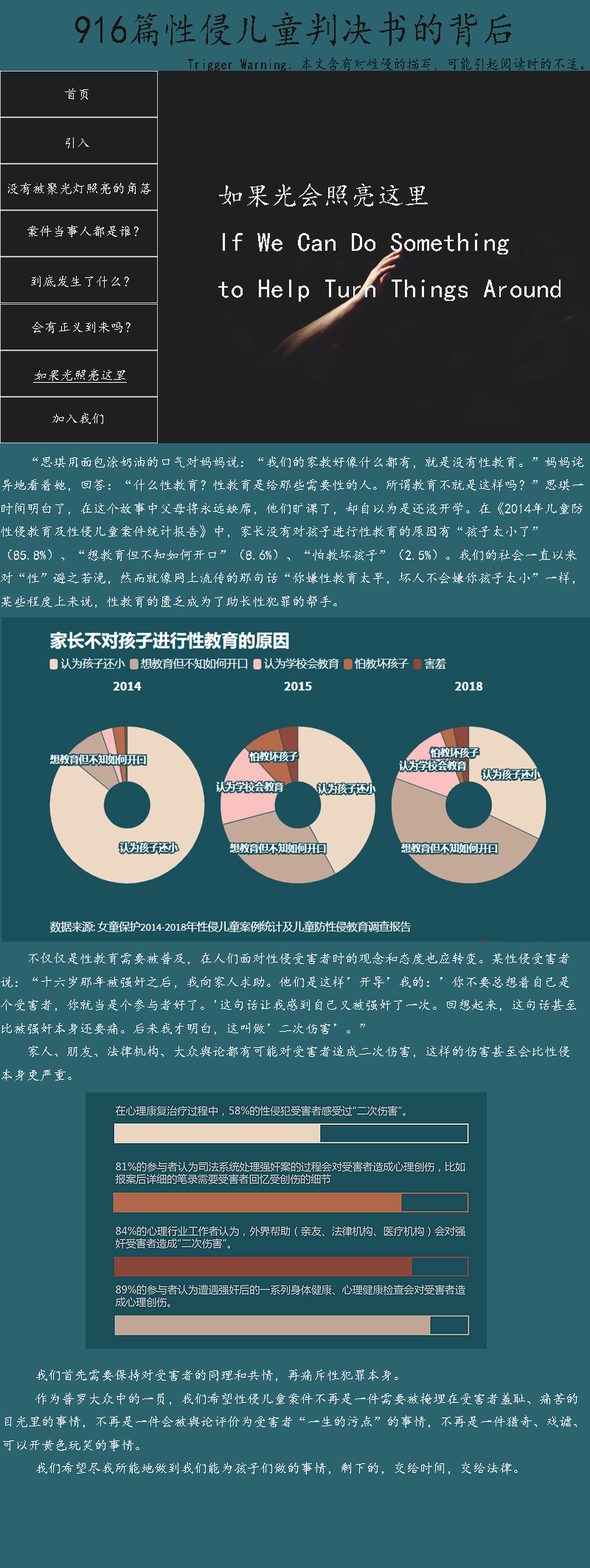
<style>
.page{position:relative;width:590px;height:1568px;background:#2b646f}
.page>*{position:absolute;margin:0}
.t1{font:39.3px "¿¬Ìå";color:#171414;scale:0.9 1}
.t2{font:14.8px "¿¬Ìå";color:#171414;scale:0.9 1}
.t3{font:13.3px "¿¬Ìå";color:#f9f5f5}
.t4{font:26.6px "¿¬Ìå";color:#fbf3f3}
.t5{font:13.3px "¿¬Ìå";color:#f9f5f5;font-style:italic;text-decoration:underline}
.t6{font:13.3px "¿¬Ìå";color:#fbf3f3}
</style>
<div class="page">
<p class="t1" style="left:75px;top:12px;width:436px;height:35px">916篇性侵儿童判决书的背后</p>
<p class="t2" style="left:188px;top:58px;width:395px;height:14px">Trigger Warning：本文含有对性侵的描写，可能引起阅读时的不适。</p>
<p class="t3" style="left:65px;top:89px;width:24px;height:11px">首页</p>
<p class="t3" style="left:66px;top:137px;width:23px;height:11px">引入</p>
<p class="t3" style="left:8px;top:182px;width:143px;height:13px">没有被聚光灯照亮的角落</p>
<p class="t4" style="left:218px;top:184px;width:343px;height:118px">如果光会照亮这里<br>If We Can Do Something <br>to Help Turn Things Around</p>
<p class="t3" style="left:27px;top:225px;width:112px;height:12px">案件当事人都是谁？</p>
<p class="t3" style="left:31px;top:275px;width:98px;height:13px">到底发生了什么？</p>
<p class="t3" style="left:32px;top:322px;width:99px;height:11px">会有正义到来吗？</p>
<p class="t5" style="left:33px;top:369px;width:94px;height:14px">如果光照亮这里</p>
<p class="t3" style="left:52px;top:413px;width:51px;height:11px">加入我们</p>
<p class="t6" style="left:1px;top:457px;width:582px;height:151px">“思琪用面包涂奶油的口气对妈妈说：“我们的家教好像什么都有，就是没有性教育。”妈妈诧<br>异地看着她，回答：“什么性教育？性教育是给那些需要性的人。所谓教育不就是这样吗？”思琪一<br>时间明白了，在这个故事中父母将永远缺席，他们旷课了，却自以为是还没开学。在《2014年儿童防<br>性侵教育及性侵儿童案件统计报告》中，家长没有对孩子进行性教育的原因有“孩子太小了”<br>（85.8%）、“想教育但不知如何开口”（8.6%）、“怕教坏孩子”（2.5%）。我们的社会一直以来<br>对“性”避之若浼，然而就像网上流传的那句话“你嫌性教育太早，坏人不会嫌你孩子太小”一样，<br>某些程度上来说，性教育的匮乏成为了助长性犯罪的帮手。</p>
<p class="t6" style="left:1px;top:952px;width:575px;height:129px">不仅仅是性教育需要被普及，在人们面对性侵受害者时的观念和态度也应转变。某性侵受害者<br>说：“十六岁那年被强奸之后，我向家人求助。他们是这样’开导’我的：’你不要总想着自己是<br>个受害者，你就当是个参与者好了。'这句话让我感到自己又被强奸了一次。回想起来，这句话甚至<br>比被强奸本身还要痛。后来我才明白，这叫做’二次伤害’。”<br>    家人、朋友、法律机构、大众舆论都有可能对受害者造成二次伤害，这样的伤害甚至会比性侵<br>本身更严重。</p>
<p class="t6" style="left:3px;top:1370px;width:574px;height:104px">我们首先需要保持对受害者的同理和共情，再痛斥性犯罪本身。<br>     作为普罗大众中的一员，我们希望性侵儿童案件不再是一件需要被掩埋在受害者羞耻、痛苦的<br>目光里的事情，不再是一件会被舆论评价为受害者“一生的污点”的事情，不再是一件猎奇、戏谑、<br>可以开黄色玩笑的事情。<br>     我们希望尽我所能地做到我们能为孩子们做的事情，剩下的，交给时间，交给法律。</p>
</div>
